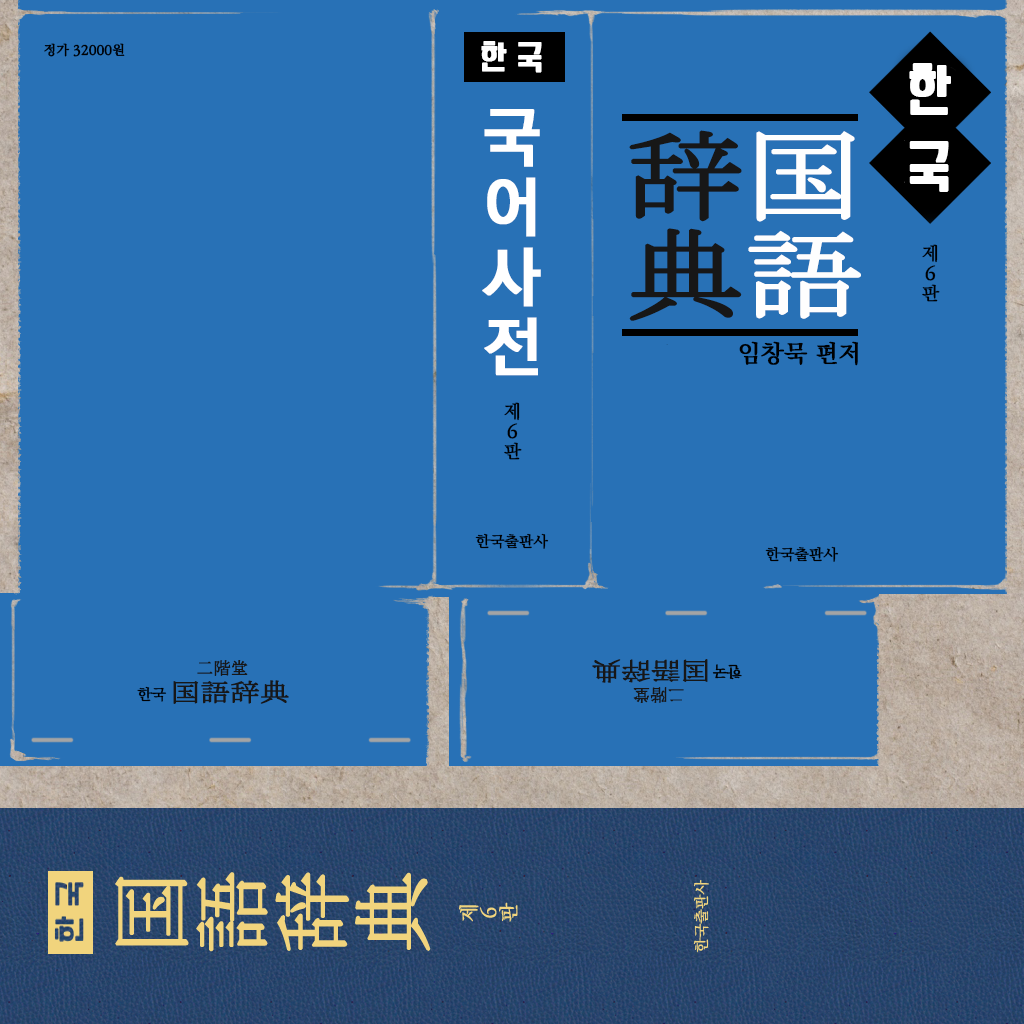
<style>
.page{position:relative;width:1024px;height:1024px;background:#2871b6}
.page>*{position:absolute;margin:0}
.t1{font:30px "YANGJIN";color:#ffffff;font-weight:bold}
.t2{font:13px "KoPubBatangLight";color:#000000;font-weight:bold}
.t3{font:50px "YANGJIN";color:#ffffff;font-weight:bold}
.t4{font:65px/70px "KoPubDotumBold";color:#ffffff;font-weight:bold}
.t5{font:18px/20px "KoPubBatangLight";color:#000000;font-weight:bold}
.t6{font:24px "KoPubBatangMedium";color:#000000;font-weight:bold}
.t7{font:15px "KoPubBatangLight";color:#000000;font-weight:bold}
</style>
<div class="page">
<p class="t1" style="left:481px;top:41px;width:61px;height:32px">한 국</p>
<p class="t2" style="left:44px;top:43px;width:81px;height:14px">정가 32000원</p>
<p class="t3" style="left:909px;top:63px;width:42px;height:52px">한</p>
<p class="t4" style="left:482px;top:109px;width:59px;height:267px;text-align:center">국<br>어<br>사<br>전</p>
<p class="t3" style="left:909px;top:141px;width:40px;height:51px">국</p>
<p class="t5" style="left:922px;top:244px;width:18px;height:58px;text-align:center">제<br>6<br>판</p>
<p class="t6" style="left:739px;top:341px;width:119px;height:25px">임창묵 편저</p>
<p class="t5" style="left:504px;top:402px;width:18px;height:58px;text-align:center">제<br>6<br>판</p>
<p class="t7" style="left:475px;top:533px;width:74px;height:16px">한국출판사</p>
<p class="t7" style="left:765px;top:546px;width:74px;height:16px">한국출판사</p>
<p class="t7" style="left:137px;top:686px;width:30px;height:16px">한국</p>
</div>
